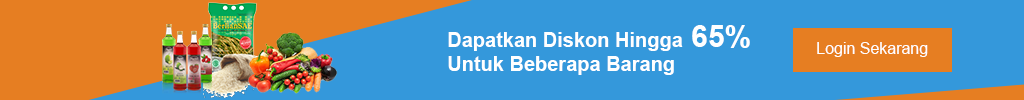
<style>
.page{position:relative;width:1024px;height:100px;background:#3498db}
.page>*{position:absolute;margin:0}
.t1{font:20px "Arial-BoldMT";color:#ffffff}
.t2{font:30px "Arial-BoldMT";color:#ffffff}
.t3{font:16px "ArialMT";color:#ffffff}
</style>
<div class="page">
<p class="t1" style="left:448px;top:25px;width:302px;height:50px">Dapatkan Diskon Hingga<span class="t2"> 65%<br></span>Untuk Beberapa Barang</p>
<p class="t3" style="left:817px;top:42px;width:111px;height:15px">Login Sekarang</p>
</div>
